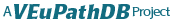
<style>
.page{position:relative;width:174px;height:23px;background:#ffffff}
.page>*{position:absolute;margin:0}
.t1{font:14px "PopplLaudatio-Light";letter-spacing:-0.03em;color:#126c80}
.t2{font:20px "PopplLaudatio-Bold";letter-spacing:0.02em;color:#126c80;font-style:italic}
.t3{font:12.6px "PopplLaudatio-Light";letter-spacing:-0.034em;color:#126c80;scale:1.11 1}
</style>
<div class="page">
<p class="t1" style="left:3px;top:6px;width:9px;height:11px">A</p>
<p class="t2" style="left:14px;top:4px;width:116px;height:16px">VEuPathDB</p>
<p class="t3" style="left:132px;top:7px;width:38px;height:12px">Project</p>
</div>
